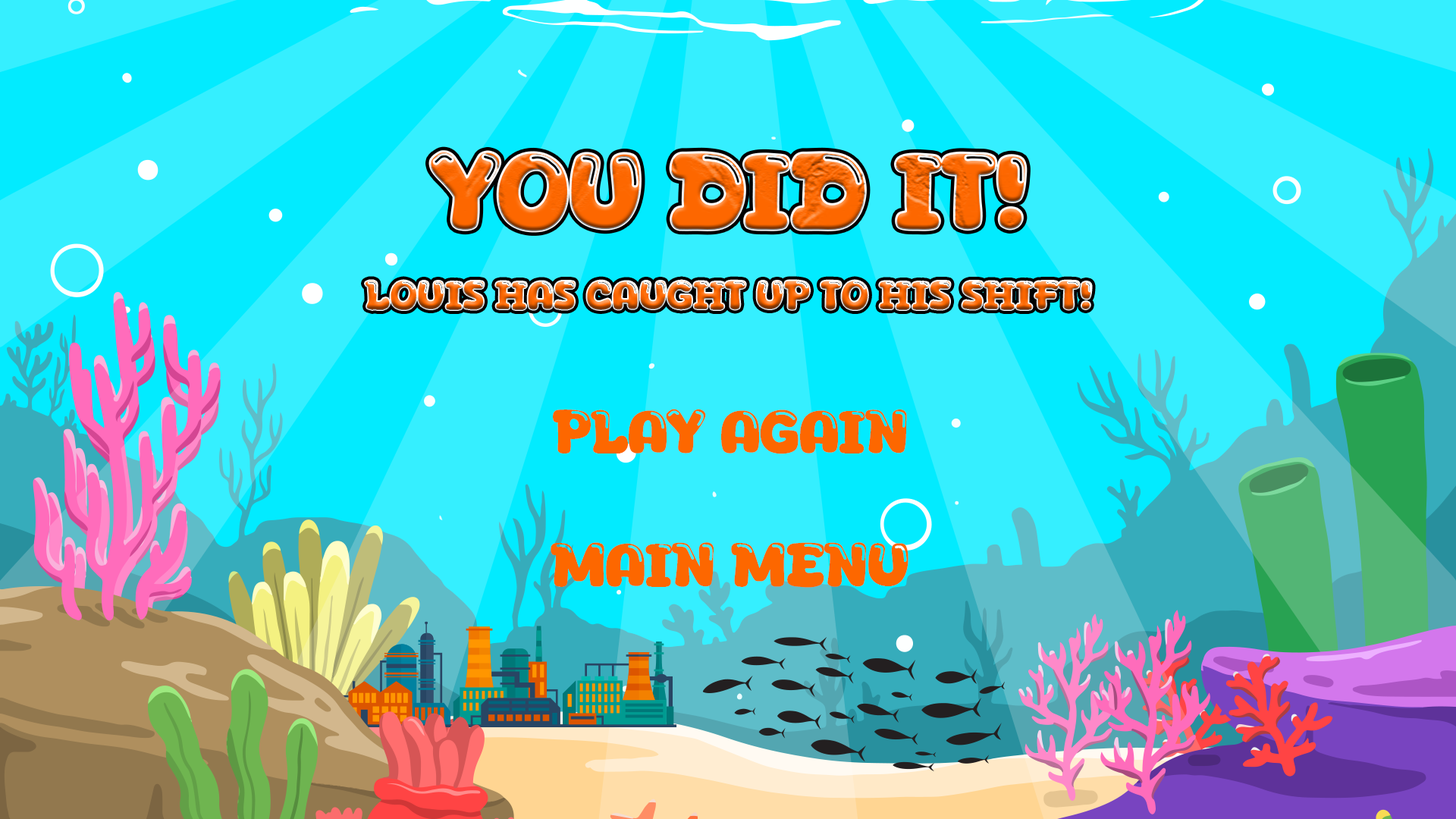
<style>
.page{position:relative;width:1456px;height:819px;background:#35efff}
.page>*{position:absolute;margin:0}
.t1{font:112.2px "Aqua-Wow"}
.t2{font:42.6px "Aqua-Wow"}
.t3{font:62.9px "Aqua-Wow";color:#fd6700}
.t4{font:63.7px "Aqua-Wow";color:#fd6700}
</style>
<div class="page">
<p class="t1" style="left:430px;top:151px;width:596px;height:80px">YOU DID IT!</p>
<p class="t2" style="left:365px;top:280px;width:727px;height:30px">Louis has caught up to his shift!</p>
<p class="t3" style="left:553px;top:409px;width:354px;height:45px">PLAY AGAIN</p>
<p class="t4" style="left:551px;top:542px;width:357px;height:46px">mAIN mENU</p>
</div>
